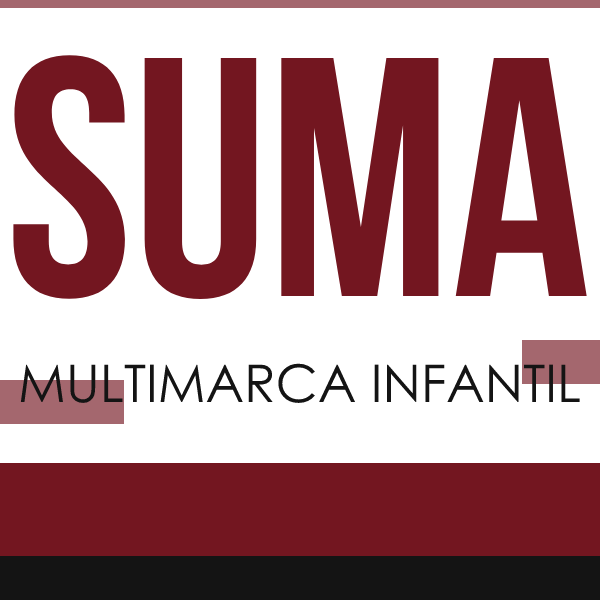
<style>
.page{position:relative;width:600px;height:600px;background:#ffffff}
.page>*{position:absolute;margin:0}
.t1{font:340px "BebasNeueBold";color:#731620}
.t2{font:52px "CenturyGothic";color:#141414}
</style>
<div class="page">
<p class="t1" style="left:13px;top:55px;width:574px;height:245px">SUMA</p>
<p class="t2" style="left:20px;top:363px;width:560px;height:40px">MULTIMARCA INFANTIL</p>
</div>
